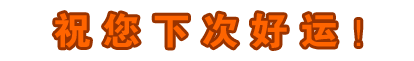
<style>
.page{position:relative;width:414px;height:61px;background:#ffffff}
.page>*{position:absolute;margin:0}
.t1{font:38px "Jdahei";letter-spacing:0.3em;color:#ff6400}
</style>
<div class="page">
<p class="t1" style="left:54px;top:13px;width:307px;height:35px">祝您下次好运！</p>
</div>
